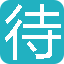
<style>
.page{position:relative;width:64px;height:64px;background:#21b1c1}
.page>*{position:absolute;margin:0}
.t1{font:60px "FZLTHJW--GB1-0";letter-spacing:1.25em;color:#ffffff}
</style>
<div class="page">
<p class="t1" style="left:5px;top:4px;width:56px;height:56px">待</p>
</div>
